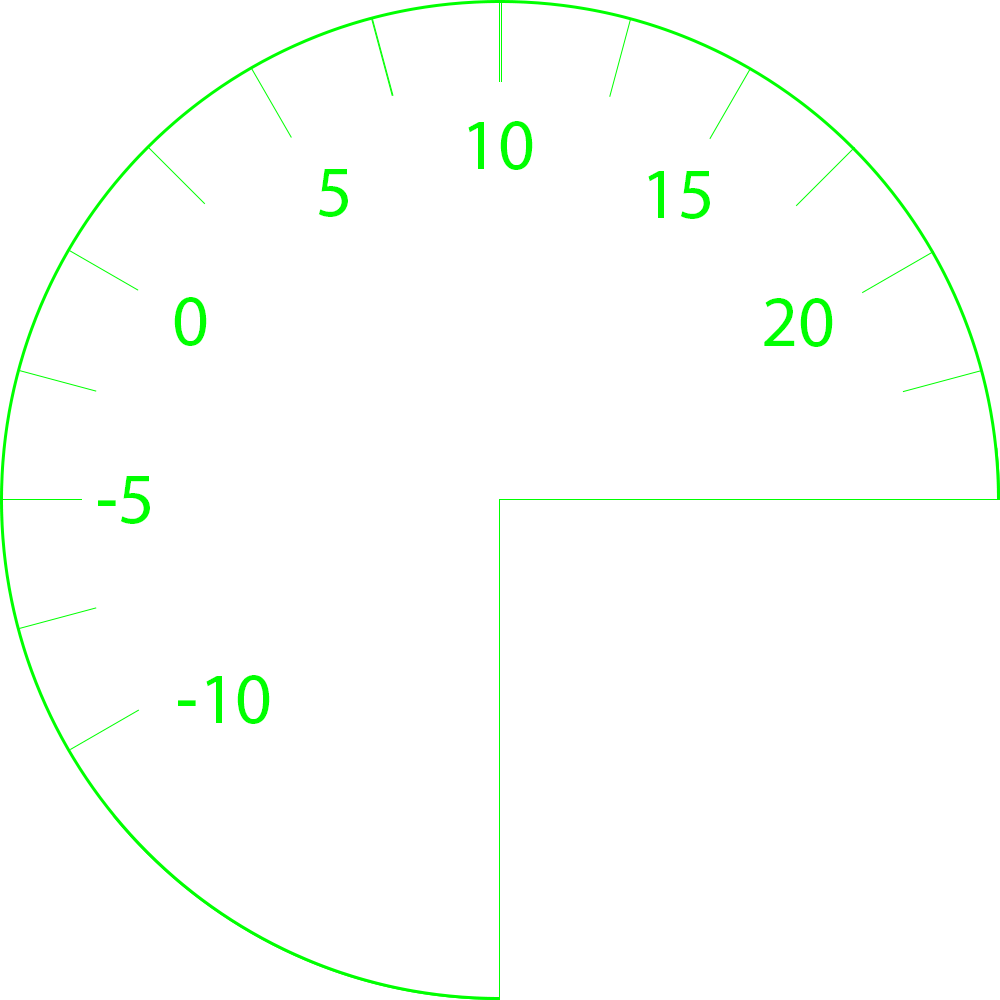
<style>
.page{position:relative;width:1000px;height:1000px;background:#ffffff}
.page>*{position:absolute;margin:0}
.t1{font:72px "MyriadHebrew-Regular";color:#00ff00}
</style>
<div class="page">
<p class="t1" style="left:468px;top:121px;width:65px;height:49px">10</p>
<p class="t1" style="left:318px;top:169px;width:30px;height:48px">5</p>
<p class="t1" style="left:648px;top:171px;width:62px;height:48px">15</p>
<p class="t1" style="left:174px;top:297px;width:33px;height:49px">0</p>
<p class="t1" style="left:764px;top:298px;width:69px;height:49px">20</p>
<p class="t1" style="left:98px;top:476px;width:52px;height:48px">-5</p>
<p class="t1" style="left:178px;top:675px;width:92px;height:49px">-10</p>
</div>
